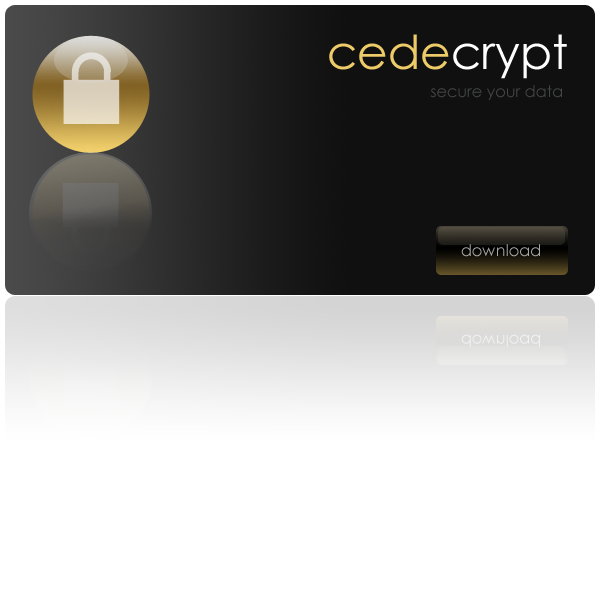
<style>
.page{position:relative;width:600px;height:600px;background:#ffffff}
.page>*{position:absolute;margin:0}
.t1{font:47px "CenturyGothic";color:#ffffff}
.t2{font:47px "CenturyGothic";color:#edcb68}
.t3{font:16px "CenturyGothic";color:#454646}
.t4{font:16px "CenturyGothic";color:#a8a8a7}
</style>
<div class="page">
<p class="t1" style="left:329px;top:34px;width:238px;height:45px"><span class="t2">cede</span>crypt</p>
<p class="t3" style="left:430px;top:85px;width:132px;height:15px">secure your data</p>
<p class="t4" style="left:461px;top:244px;width:79px;height:13px">download</p>
</div>
